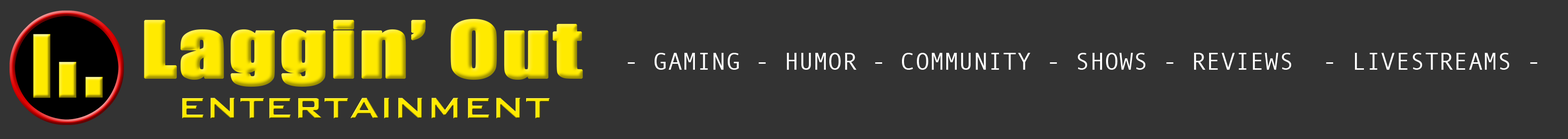
<style>
.page{position:relative;width:1568px;height:139px;background:#333333}
.page>*{position:absolute;margin:0}
.t1{font:23.9px "AndaleMono";letter-spacing:0.01em;color:#ffffff}
</style>
<div class="page">
<p class="t1" style="left:628px;top:53px;width:910px;height:17px">- GAMING - HUMOR - COMMUNITY - SHOWS - REVIEWS  - LIVESTREAMS -</p>
</div>
